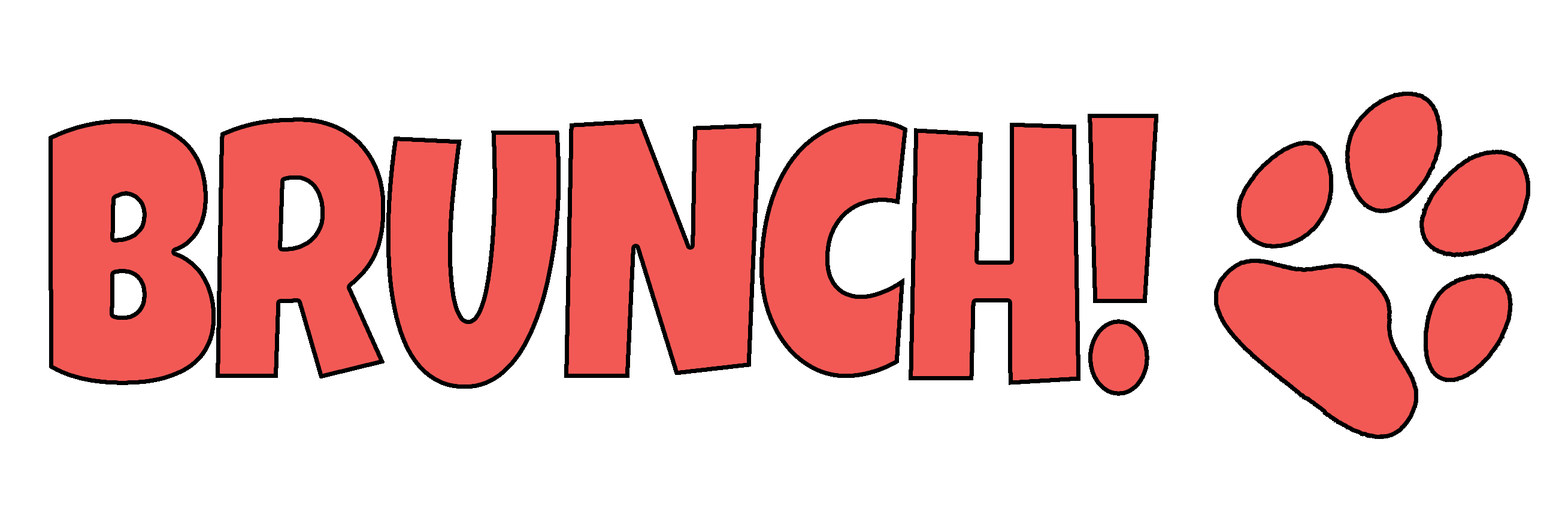
<style>
.page{position:relative;width:1568px;height:530px;background:#ffffff}
.page>*{position:absolute;margin:0}
.t1{font:366.7px "LuckiestGuy-Regular";letter-spacing:-0.02em;color:#f25955;scale:0.8 1}
</style>
<div class="page">
<p class="t1" style="left:49px;top:114px;width:1109px;height:282px">BRUNCH!</p>
</div>
